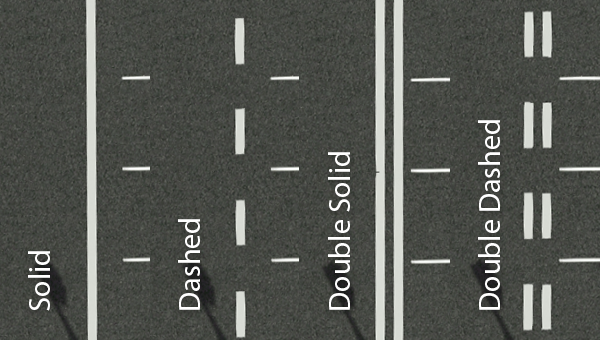
<style>
.page{position:relative;width:600px;height:340px}
.page>*{position:absolute;margin:0}
.t1{font:30px "MyriadPro-Regular";color:#ffffff}
</style>
<div class="page">
<p class="t1" style="left:478px;top:120px;width:22px;height:190px;rotate:-90deg">Double Dashed</p>
<p class="t1" style="left:328px;top:152px;width:22px;height:158px;rotate:-90deg">Double Solid</p>
<p class="t1" style="left:178px;top:219px;width:22px;height:91px;rotate:-90deg">Dashed</p>
<p class="t1" style="left:28px;top:251px;width:22px;height:60px;rotate:-90deg">Solid</p>
</div>
